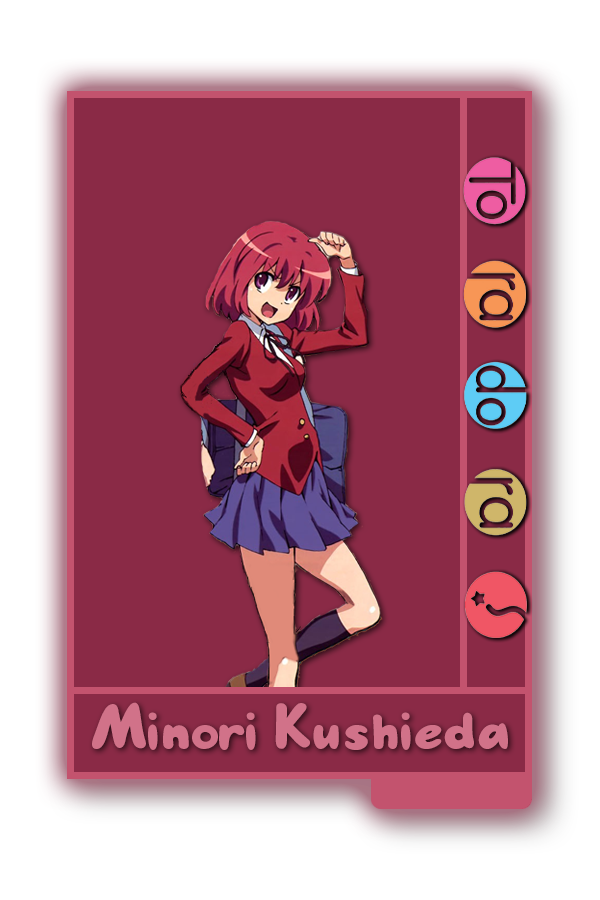
<style>
.page{position:relative;width:600px;height:900px;background:#8a2a46}
.page>*{position:absolute;margin:0}
.t1{font:66.1px "Go-Mocha";color:#d17289;scale:1.08 1}
</style>
<div class="page">
<p class="t1" style="left:92px;top:702px;width:416px;height:48px">Minori Kushieda</p>
</div>
